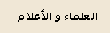
<style>
.page{position:relative;width:110px;height:33px;background:#f0e7d6}
.page>*{position:absolute;margin:0}
.t1{font:11px "Tahoma-Bold";color:#000000}
</style>
<div class="page">
<p class="t1" style="left:18px;top:9px;width:79px;height:13px">العلماء و الأعلام</p>
</div>
